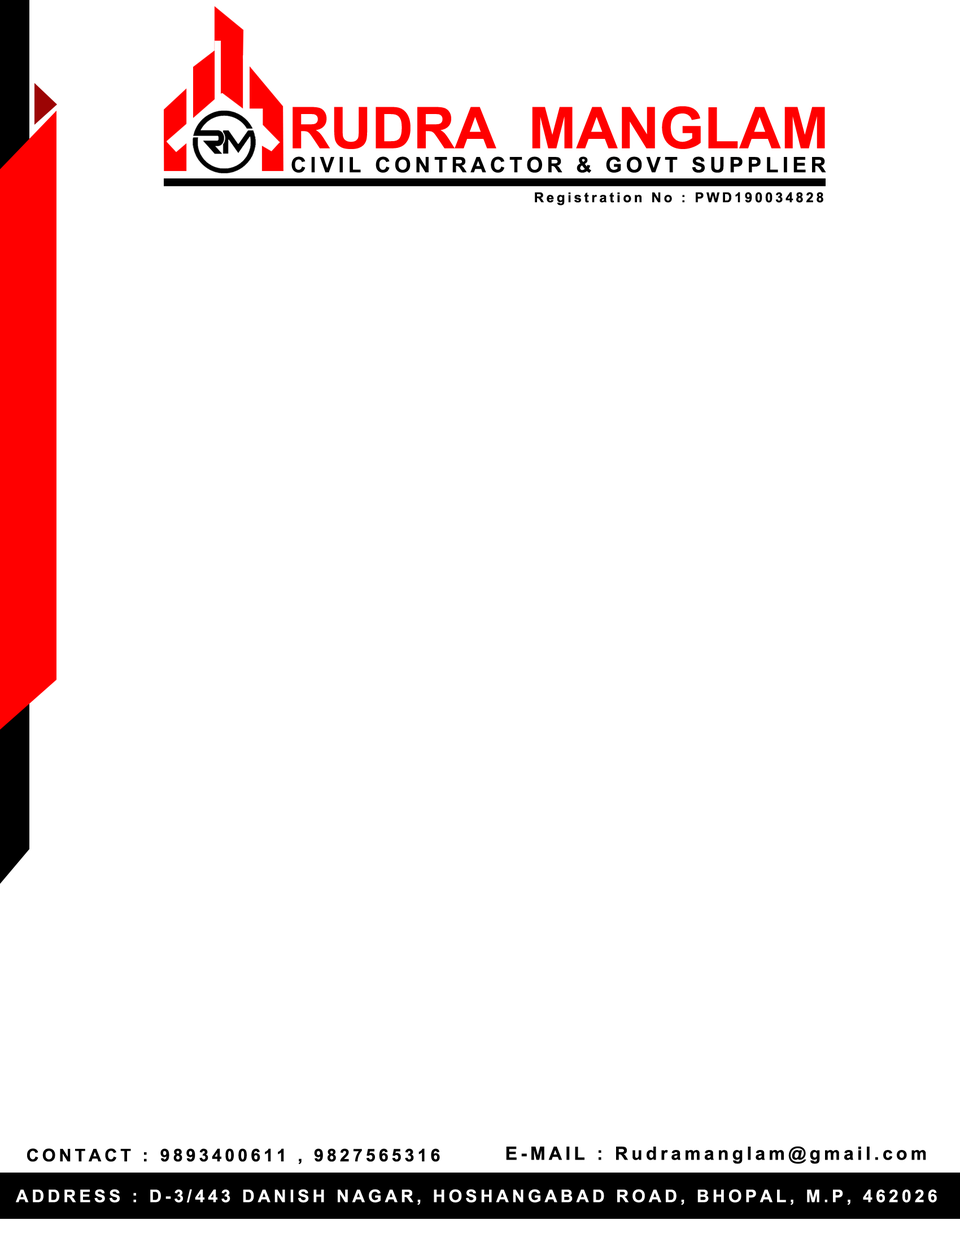
<style>
.page{position:relative;width:960px;height:1242px;background:#ffffff}
.page>*{position:absolute;margin:0}
.t1{font:57.5px "Arial-BoldMT";color:#ff0000}
.t2{font:21.3px "Arial-BoldMT";letter-spacing:0.188em;color:#000000}
.t3{font:13.7px "Arial-BoldMT";letter-spacing:0.188em;color:#000000}
.t4{font:17.4px "Arial-BoldMT";letter-spacing:0.188em;color:#000000}
.t5{font:18.2px "Arial-BoldMT";letter-spacing:0.188em;color:#000000}
.t6{font:17.4px "Arial-BoldMT";letter-spacing:0.188em;color:#ffffff}
</style>
<div class="page">
<p class="t1" style="left:292px;top:106px;width:533px;height:43px">RUDRA  MANGLAM</p>
<p class="t2" style="left:291px;top:156px;width:535px;height:17px">CIVIL CONTRACTOR &amp; GOVT SUPPLIER</p>
<p class="t3" style="left:535px;top:192px;width:288px;height:14px">Registration No : PWD190034828</p>
<p class="t4" style="left:27px;top:1149px;width:120px;height:13px">CONTACT :</p>
<p class="t4" style="left:160px;top:1149px;width:280px;height:15px">9893400611 , 9827565316</p>
<p class="t5" style="left:506px;top:1146px;width:420px;height:18px">E-MAIL : Rudramanglam@gmail.com</p>
<p class="t6" style="left:16px;top:1189px;width:921px;height:17px">ADDRESS : D-3/443 DANISH NAGAR, HOSHANGABAD ROAD, BHOPAL, M.P, 462026</p>
</div>
